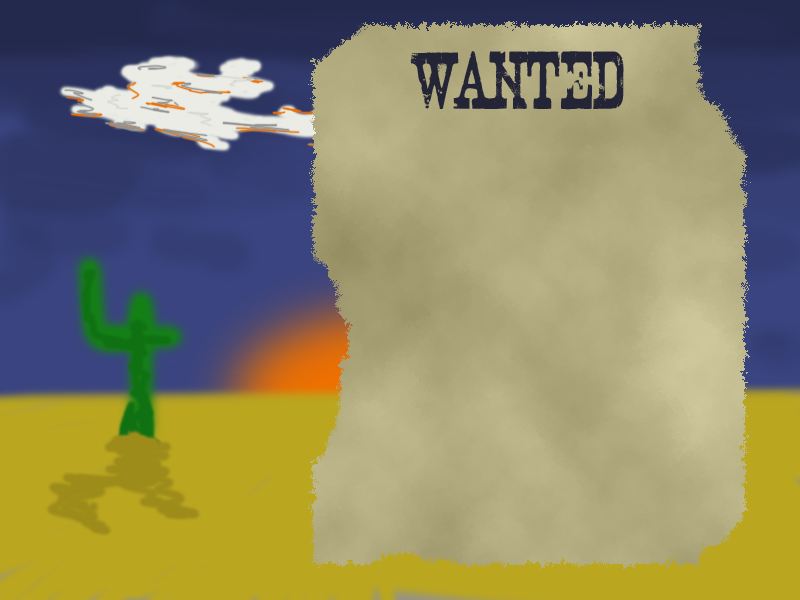
<style>
.page{position:relative;width:800px;height:600px}
.page>*{position:absolute;margin:0}
.t1{font:72px "Nashville";color:#242437}
</style>
<div class="page">
<p class="t1" style="left:410px;top:51px;width:214px;height:59px">WANTED</p>
</div>
